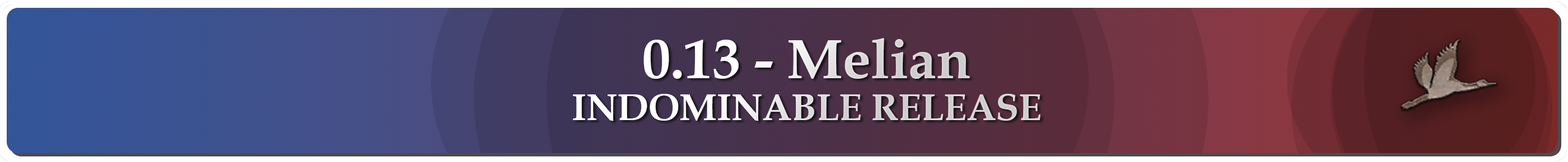
<style>
.page{position:relative;width:1568px;height:162px}
.page>*{position:absolute;margin:0}
.t1{font:37.3px/42px "BookAntiqua-Bold"}
.t2{font:56px "BookAntiqua-Bold"}
</style>
<div class="page">
<p class="t1" style="left:573px;top:38px;width:467px;height:84px;text-align:center"><span class="t2">0.13 - Melian<br></span>INDOMINABLE RELEASE</p>
</div>
